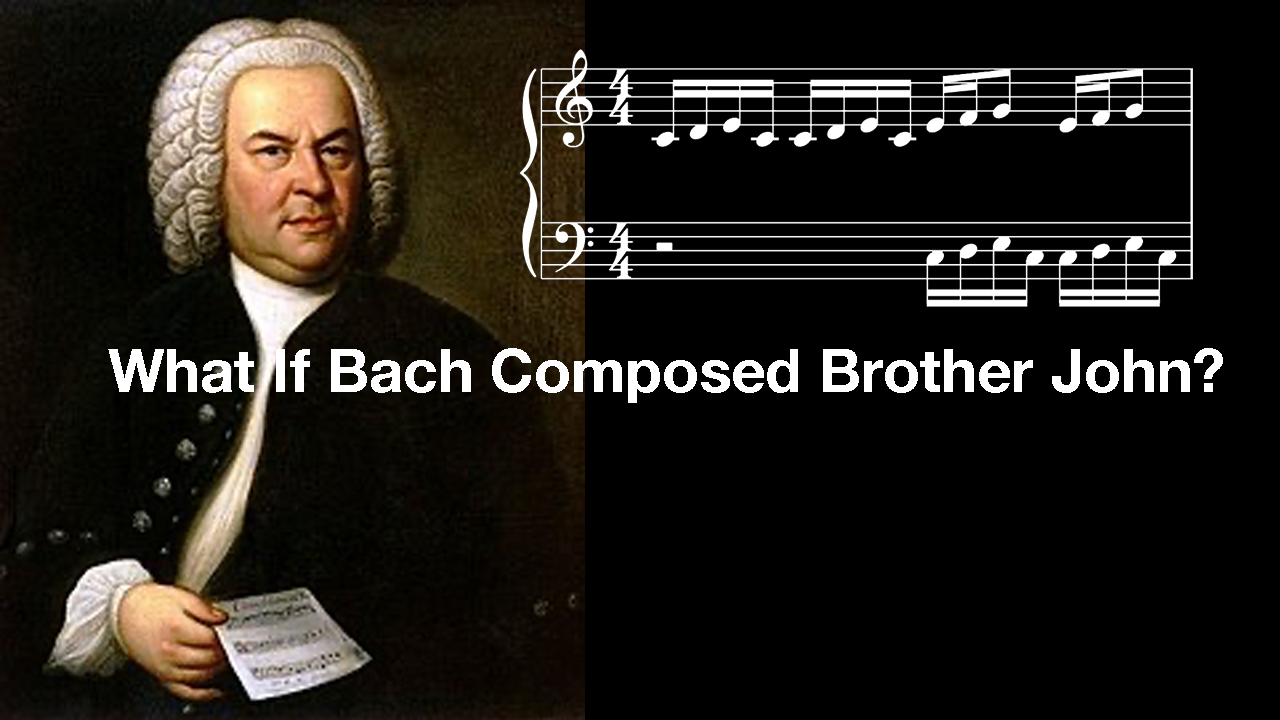
<style>
.page{position:relative;width:1280px;height:720px;background:#000000}
.page>*{position:absolute;margin:0}
.t1{font:60px "HelveticaNeue-Bold";color:#ffffff}
</style>
<div class="page">
<p class="t1" style="left:108px;top:348px;width:1115px;height:55px">What If Bach Composed Brother John?</p>
</div>
